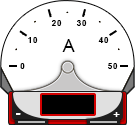
<style>
.page{position:relative;width:135px;height:125px;background:#ffffff}
.page>*{position:absolute;margin:0}
.t1{font:8px "Arial-BoldMT";letter-spacing:0.1em;color:#000000;text-transform:uppercase}
.t2{font:18px "ArialMT";letter-spacing:0.1em;color:#000000;text-transform:uppercase}
.t3{font:21.3px "Candara-Bold";letter-spacing:0.2em;color:#ffffff;text-transform:uppercase}
.t4{font:14.1px "Candara-Bold";letter-spacing:0.2em;color:#ffffff;text-transform:uppercase}
</style>
<div class="page">
<p class="t1" style="left:51px;top:20px;width:11px;height:6px">20</p>
<p class="t1" style="left:76px;top:20px;width:11px;height:6px">30</p>
<p class="t1" style="left:28px;top:37px;width:10px;height:6px">10</p>
<p class="t2" style="left:62px;top:39px;width:13px;height:13px">A</p>
<p class="t1" style="left:98px;top:37px;width:11px;height:6px">40</p>
<p class="t1" style="left:20px;top:63px;width:5px;height:6px">0</p>
<p class="t1" style="left:108px;top:63px;width:10px;height:6px">50</p>
<p class="t3" style="left:16px;top:113px;width:5px;height:2px">-</p>
<p class="t4" style="left:113px;top:112px;width:7px;height:5px">+</p>
</div>
